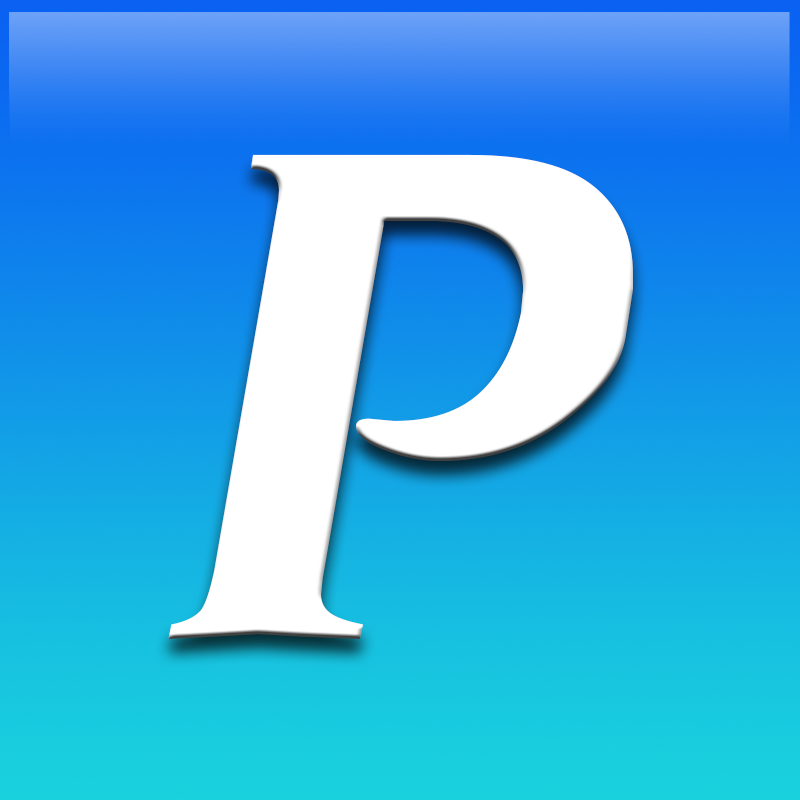
<style>
.page{position:relative;width:800px;height:800px}
.page>*{position:absolute;margin:0}
.t1{font:762.2px "Imperia";color:#ffffff}
</style>
<div class="page">
<p class="t1" style="left:168px;top:154px;width:465px;height:485px">P</p>
</div>
